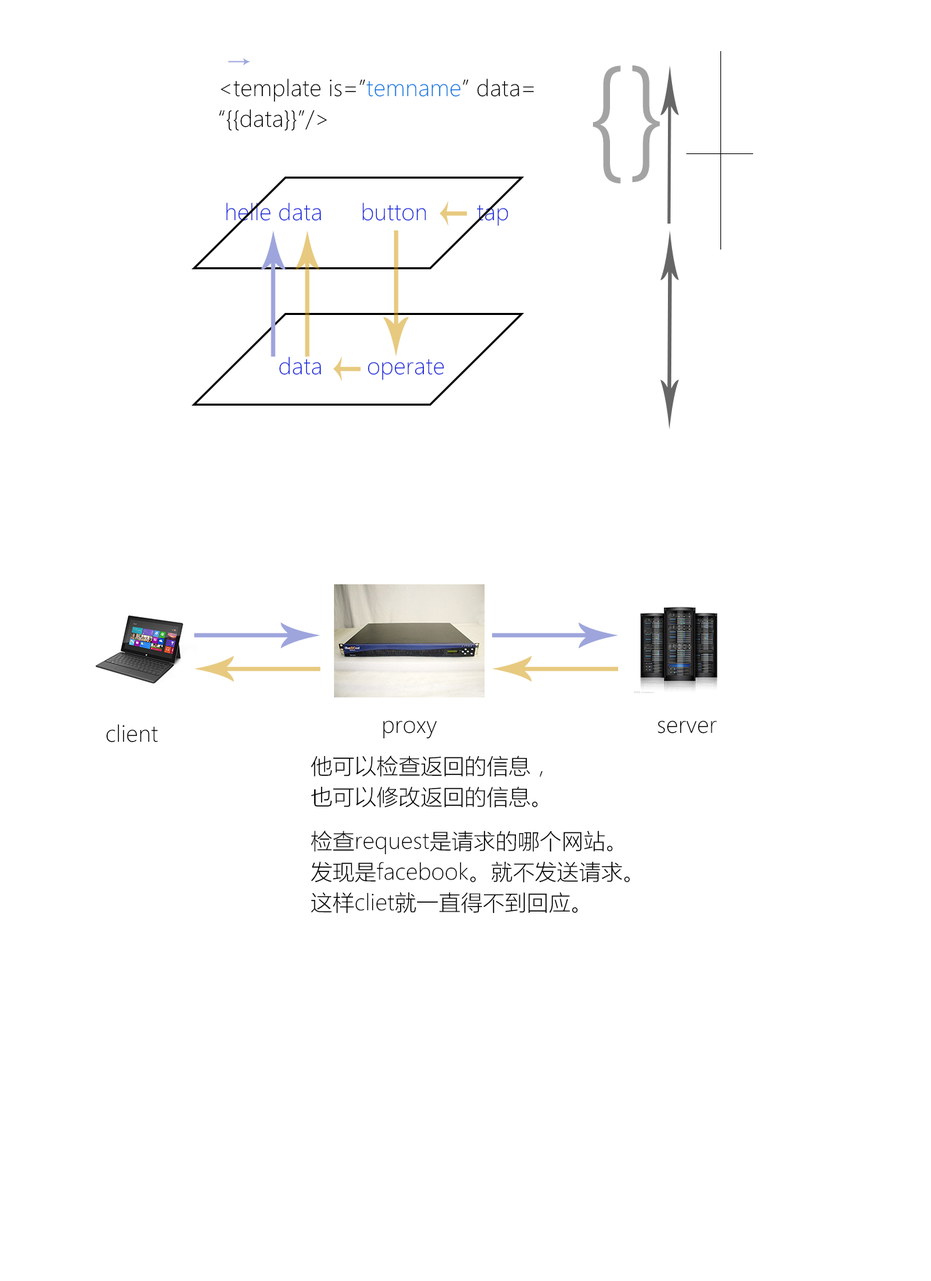
<style>
.page{position:relative;width:931px;height:1281px;background:#ffffff}
.page>*{position:absolute;margin:0}
.t1{font:126.6px "MicrosoftYaHeiLight";letter-spacing:0.01em;color:#a3a3a3}
.t2{font:125.5px "MicrosoftYaHeiLight";letter-spacing:0.01em;color:#a3a3a3}
.t3{font:21.8px/30.7px "MicrosoftYaHeiLight";letter-spacing:0.01em;color:#000000}
.t4{font:21.8px/30.7px "MicrosoftYaHeiLight";letter-spacing:0.01em;color:#0f77e2}
.t5{font:21.8px "MicrosoftYaHeiLight";letter-spacing:0.01em;color:#1e2bdb}
.t6{font:21.8px "MicrosoftYaHeiLight";letter-spacing:0.01em;color:#000000}
</style>
<div class="page">
<p class="t1" style="left:593px;top:65px;width:28px;height:118px">{</p>
<p class="t2" style="left:632px;top:65px;width:28px;height:118px;rotate:180deg">{</p>
<p class="t3" style="left:219px;top:78px;width:315px;height:53px">&lt;template is=”<span class="t4">temname</span>” data=<br>“{{data}}”/&gt;</p>
<p class="t5" style="left:226px;top:202px;width:95px;height:19px">helle data</p>
<p class="t5" style="left:363px;top:202px;width:63px;height:19px">button</p>
<p class="t5" style="left:477px;top:204px;width:31px;height:22px">tap</p>
<p class="t5" style="left:279px;top:356px;width:42px;height:19px">data</p>
<p class="t5" style="left:368px;top:359px;width:76px;height:21px">operate</p>
<p class="t6" style="left:106px;top:724px;width:52px;height:18px">client</p>
<p class="t6" style="left:383px;top:720px;width:54px;height:18px">proxy</p>
<p class="t6" style="left:658px;top:720px;width:59px;height:13px">server</p>
<p class="t3" style="left:311px;top:755px;width:232px;height:53px">他可以检查返回的信息，<br>也可以修改返回的信息。</p>
<p class="t3" style="left:311px;top:830px;width:319px;height:83px">检查request是请求的哪个网站。<br>发现是facebook。就不发送请求。<br>这样cliet就一直得不到回应。</p>
</div>
